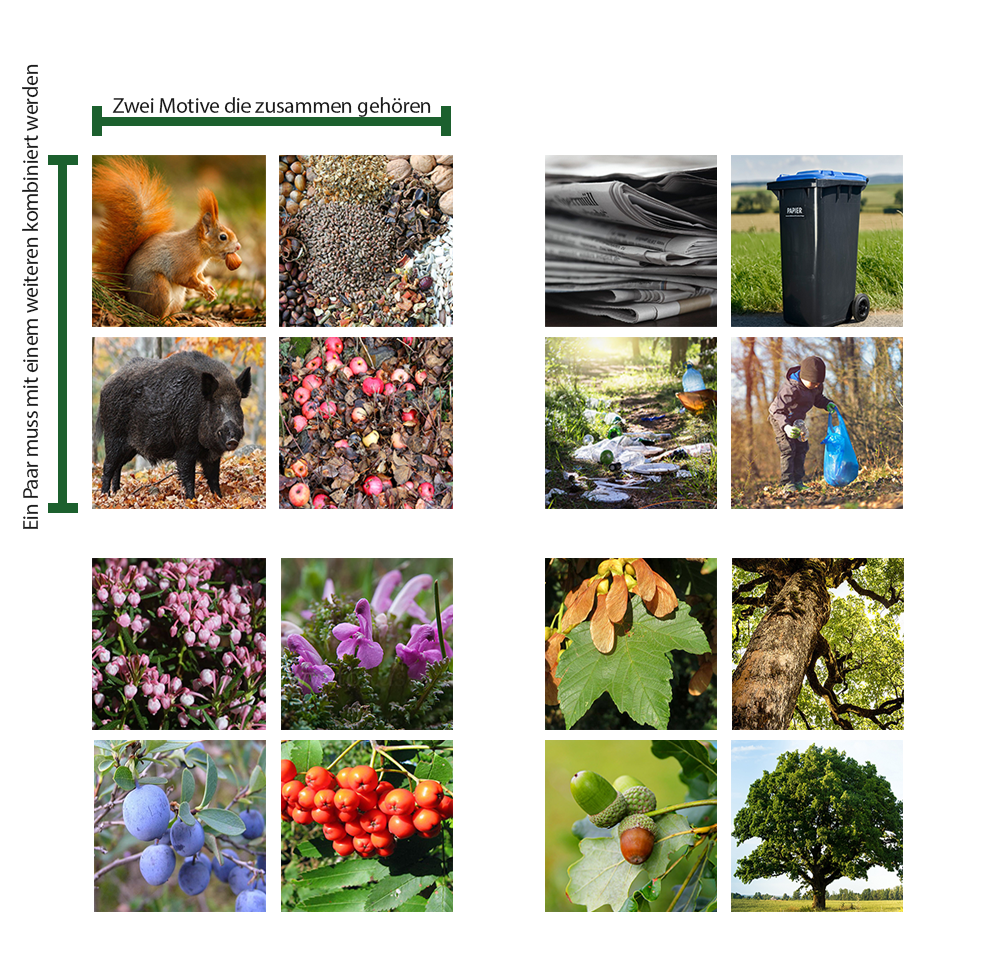
<style>
.page{position:relative;width:997px;height:976px;background:#ffffff}
.page>*{position:absolute;margin:0}
.t1{font:22px "MyriadPro-Regular";letter-spacing:-0.02em;color:#1b1b1b}
</style>
<div class="page">
<p class="t1" style="left:22px;top:64px;width:16px;height:465px;rotate:-90deg">Ein Paar muss mit einem weiteren kombiniert werden</p>
<p class="t1" style="left:112px;top:97px;width:319px;height:20px">Zwei Motive die zusammen gehören</p>
</div>
